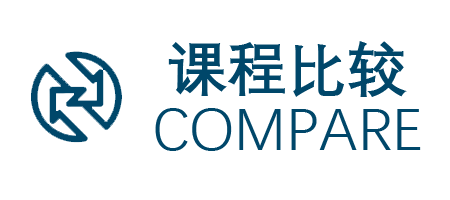
<style>
.page{position:relative;width:450px;height:200px;background:#ffffff}
.page>*{position:absolute;margin:0}
.t1{font:60px "DengXian-Bold";color:#00476a}
.t2{font:60px "DengXian-Regular";color:#00476a}
</style>
<div class="page">
<p class="t1" style="left:168px;top:41px;width:239px;height:56px">课程比较</p>
<p class="t2" style="left:155px;top:108px;width:266px;height:43px">COMPARE</p>
</div>
